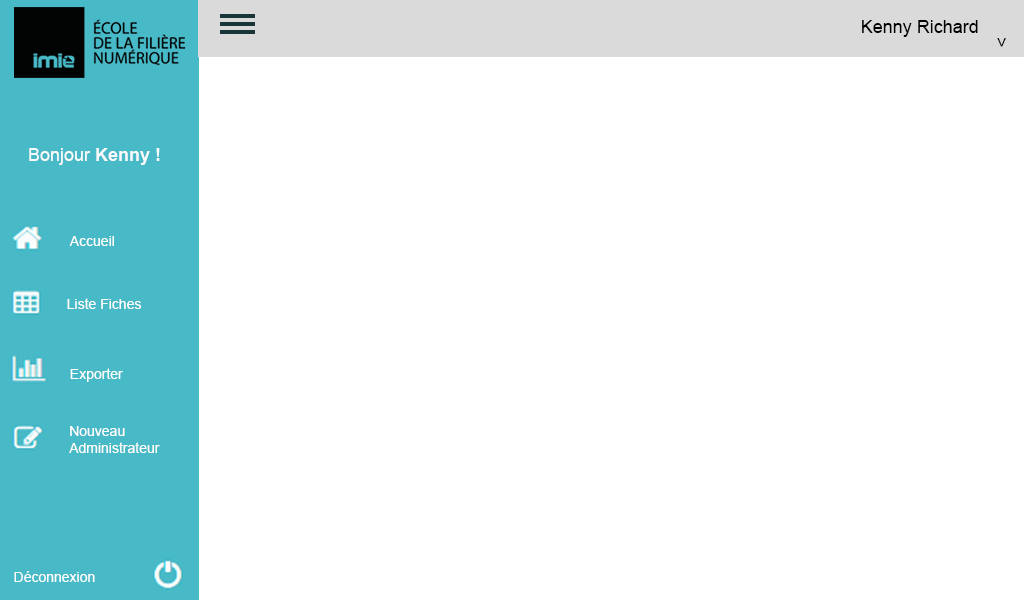
<style>
.page{position:relative;width:1024px;height:600px;background:#ffffff}
.page>*{position:absolute;margin:0}
.t1{font:18px "ArialMT";color:#010101}
.t2{font:18px "ArialMT";color:#fcfbfb}
.t3{font:18px "Arial-BoldMT";color:#fcfbfb}
.t4{font:14px "ArialMT";color:#fefefe}
</style>
<div class="page">
<p class="t1" style="left:862px;top:20px;width:116px;height:17px">Kenny Richard</p>
<p class="t1" style="left:997px;top:37px;width:9px;height:10px;rotate:90deg">&gt;</p>
<p class="t2" style="left:29px;top:148px;width:131px;height:17px">Bonjour<span class="t3"> Kenny !</span></p>
<p class="t4" style="left:69px;top:236px;width:45px;height:10px">Accueil</p>
<p class="t4" style="left:67px;top:298px;width:75px;height:11px">Liste Fiches</p>
<p class="t4" style="left:70px;top:368px;width:53px;height:14px">Exporter</p>
<p class="t4" style="left:69px;top:426px;width:91px;height:27px">Nouveau<br>Administrateur</p>
<p class="t4" style="left:14px;top:571px;width:81px;height:11px">Déconnexion</p>
</div>
